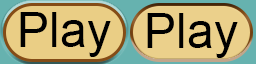
<style>
.page{position:relative;width:256px;height:64px;background:#eace85}
.page>*{position:absolute;margin:0}
.t1{font:48px "ArialMT";color:#000000}
</style>
<div class="page">
<p class="t1" style="left:20px;top:12px;width:91px;height:45px">Play</p>
<p class="t1" style="left:147px;top:13px;width:91px;height:45px">Play</p>
</div>
